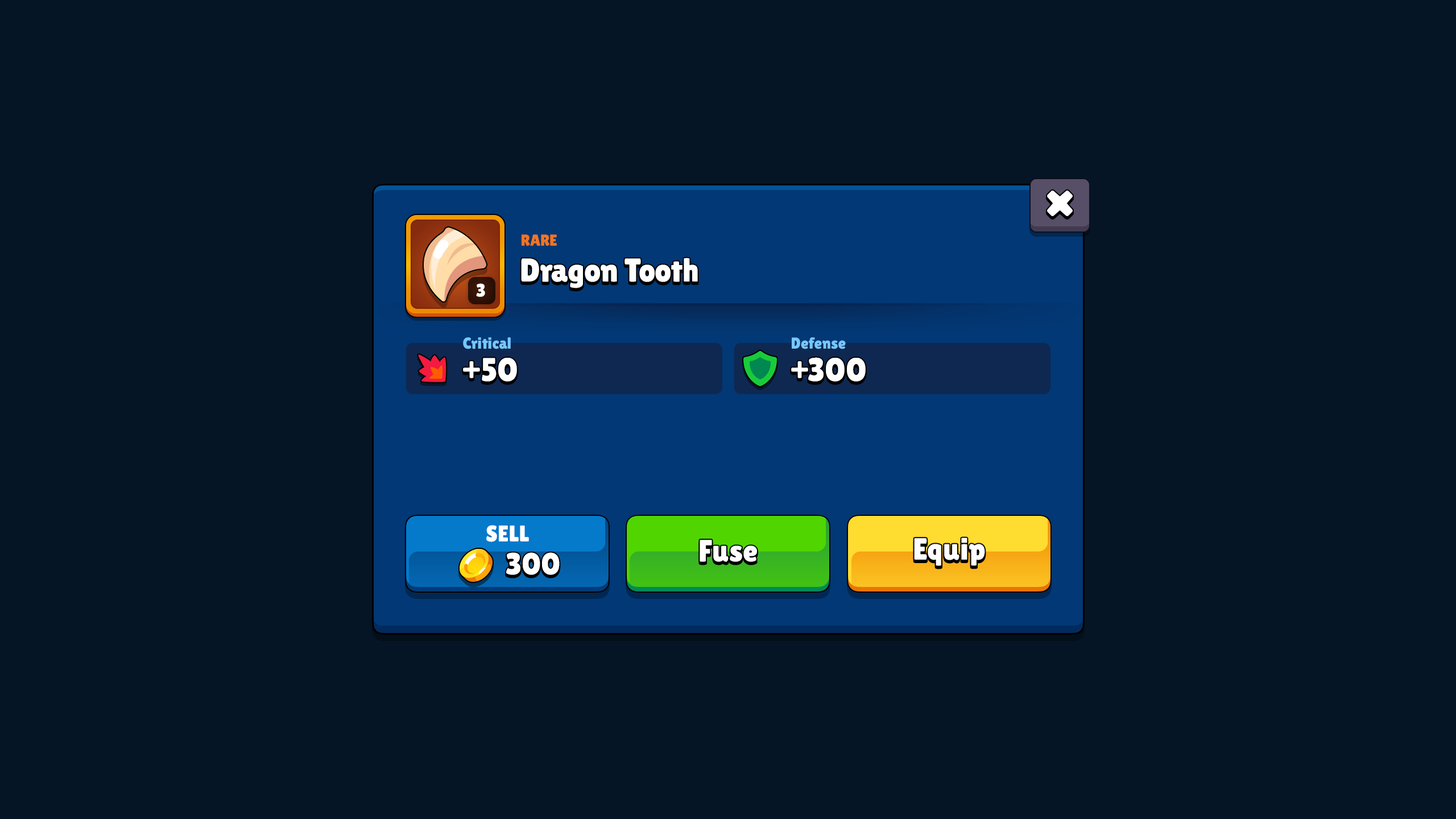
<style>
.page{position:relative;width:1456px;height:819px;background:#051525}
.page>*{position:absolute;margin:0}
.t1{font:15.9px "LilitaOne";color:#f37521;text-transform:uppercase}
.t2{font:33px "LilitaOne";color:#ffffff}
.t3{font:18.2px "LilitaOne";color:#ffffff}
.t4{font:15.9px "LilitaOne";letter-spacing:0.02em;color:#76c7ff}
.t5{font:33px "LilitaOne";letter-spacing:0.02em;color:#ffffff}
.t6{font:22.7px "LilitaOne";letter-spacing:0.02em;color:#ffffff;text-transform:uppercase}
.t7{font:30.7px "LilitaOne";letter-spacing:0.02em;color:#ffffff}
</style>
<div class="page">
<p class="t1" style="left:522px;top:234px;width:35px;height:12px">Rare</p>
<p class="t2" style="left:521px;top:258px;width:177px;height:30px">Dragon Tooth</p>
<p class="t3" style="left:476px;top:283px;width:9px;height:14px">3</p>
<p class="t4" style="left:463px;top:337px;width:48px;height:12px">Critical</p>
<p class="t4" style="left:792px;top:337px;width:54px;height:12px">Defense</p>
<p class="t5" style="left:463px;top:358px;width:54px;height:24px">+50</p>
<p class="t5" style="left:791px;top:357px;width:75px;height:25px">+300</p>
<p class="t6" style="left:486px;top:525px;width:43px;height:17px">sell</p>
<p class="t7" style="left:700px;top:540px;width:57px;height:22px">Fuse</p>
<p class="t7" style="left:914px;top:537px;width:71px;height:29px">Equip</p>
<p class="t7" style="left:506px;top:552px;width:54px;height:23px">300</p>
</div>
